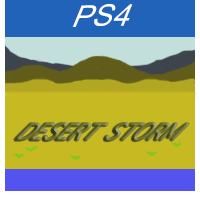
<style>
.page{position:relative;width:200px;height:200px;background:#c7b921}
.page>*{position:absolute;margin:0}
.t1{font:32.4px "ArialMT";color:#ffffff;scale:0.93 1}
.t2{font:42.1px "AppleSymbols";scale:0.71 1}
</style>
<div class="page">
<p class="t1" style="left:72px;top:4px;width:61px;height:23px;rotate:-1deg">PS4</p>
<p class="t2" style="left:14px;top:123px;width:175px;height:18px">DESERT STORM</p>
</div>
